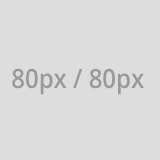
<style>
.page{position:relative;width:160px;height:160px;background:#dddddd}
.page>*{position:absolute;margin:0}
.t1{font:26.4px "OpenSans-Semibold";color:#999999;scale:0.91 1}
</style>
<div class="page">
<p class="t1" style="left:12px;top:68px;width:132px;height:27px">80px / 80px</p>
</div>
